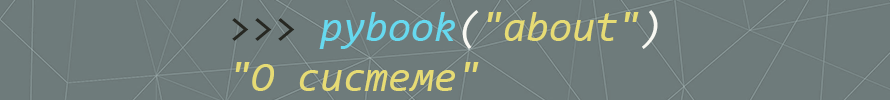
<style>
.page{position:relative;width:890px;height:100px;background:#6e7b7b}
.page>*{position:absolute;margin:0}
.t1{font:41.7px "Consolas-Italic";color:#e6db74}
.t2{font:41.7px "Consolas";color:#272822}
.t3{font:41.7px "Consolas-Italic";color:#66d9ef}
.t4{font:41.7px "Consolas-Italic";color:#f8f8f2}
</style>
<div class="page">
<p class="t1" style="left:232px;top:10px;width:426px;height:81px"><span class="t2">&gt;&gt;&gt; </span><span class="t3">pybook</span><span class="t4">(</span>"about"<span class="t4">)<br></span>"О системе"</p>
</div>
